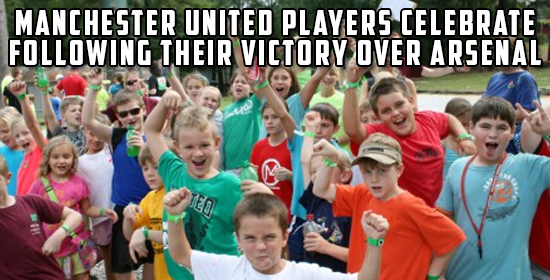
<style>
.page{position:relative;width:550px;height:280px}
.page>*{position:absolute;margin:0}
.t1{font:34px "AmericanCaptain";letter-spacing:0.075em;color:#fefefe;text-transform:uppercase}
</style>
<div class="page">
<p class="t1" style="left:10px;top:10px;width:531px;height:55px">Manchester United players celebrate following their victory over arsenal</p>
</div>
